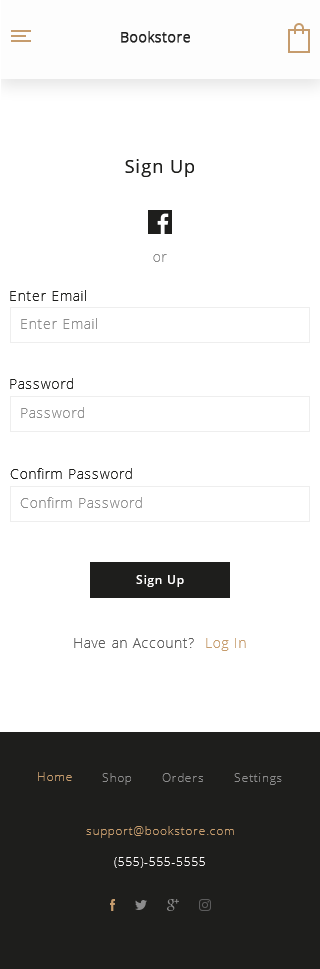
<style>
.page{position:relative;width:320px;height:969px;background:#ffffff}
.page>*{position:absolute;margin:0}
.t1{font:18px "OpenSans";letter-spacing:0.05em;color:#1e1e1c}
.t2{font:14px "OpenSans-Light";letter-spacing:0.05em;color:#8c8c8c}
.t3{font:14px "OpenSans-Light";letter-spacing:0.05em;color:#1e1e1c}
.t4{font:12px "OpenSans-Semibold";letter-spacing:0.05em;color:#fffefe}
.t5{font:14px "OpenSans-Light";letter-spacing:0.05em;color:#5c5c5c}
.t6{font:14px "OpenSans-Light";letter-spacing:0.05em;color:#c69c6d}
</style>
<div class="page">
<p class="t1" style="left:125px;top:159px;width:69px;height:18px">Sign Up</p>
<p class="t2" style="left:153px;top:254px;width:14px;height:8px">or</p>
<p class="t3" style="left:10px;top:290px;width:76px;height:11px">Enter Email</p>
<p class="t2" style="left:21px;top:318px;width:76px;height:11px">Enter Email</p>
<p class="t3" style="left:10px;top:378px;width:63px;height:11px">Password</p>
<p class="t2" style="left:21px;top:407px;width:63px;height:11px">Password</p>
<p class="t3" style="left:10px;top:468px;width:122px;height:11px">Confirm Password</p>
<p class="t2" style="left:20px;top:497px;width:122px;height:11px">Confirm Password</p>
<p class="t4" style="left:136px;top:575px;width:48px;height:12px">Sign Up</p>
<p class="t5" style="left:74px;top:638px;width:120px;height:10px">Have an Account?</p>
<p class="t6" style="left:206px;top:638px;width:40px;height:13px">Log In</p>
</div>
